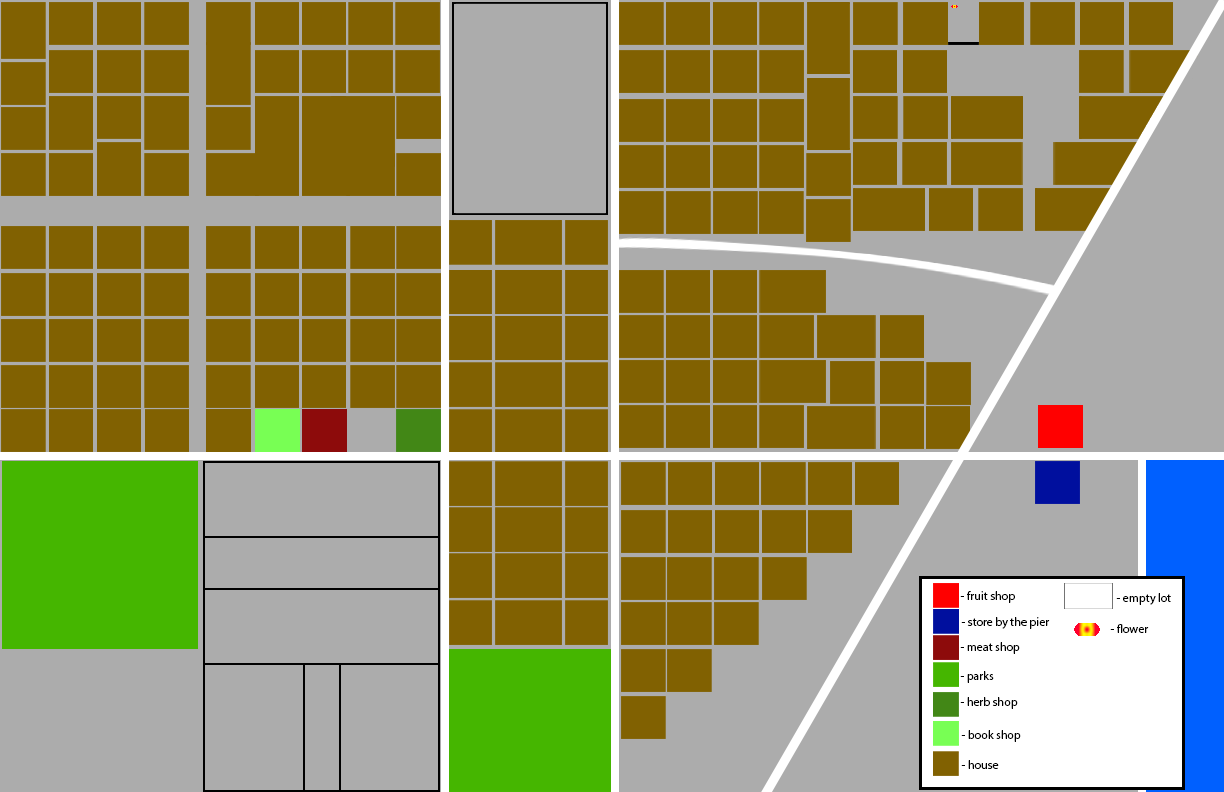
<style>
.page{position:relative;width:1224px;height:792px;background:#acacac}
.page>*{position:absolute;margin:0}
.t1{font:12px "MyriadPro-Regular";color:#000000}
</style>
<div class="page">
<p class="t1" style="left:960px;top:591px;width:55px;height:12px">- fruit shop</p>
<p class="t1" style="left:1116px;top:593px;width:55px;height:12px">- empty lot</p>
<p class="t1" style="left:961px;top:617px;width:89px;height:12px">- store by the pier</p>
<p class="t1" style="left:1110px;top:624px;width:39px;height:9px">- flower</p>
<p class="t1" style="left:960px;top:642px;width:60px;height:12px">- meat shop</p>
<p class="t1" style="left:960px;top:671px;width:34px;height:12px">- parks</p>
<p class="t1" style="left:960px;top:697px;width:58px;height:12px">- herb shop</p>
<p class="t1" style="left:961px;top:730px;width:60px;height:12px">- book shop</p>
<p class="t1" style="left:961px;top:760px;width:38px;height:9px">- house</p>
</div>
